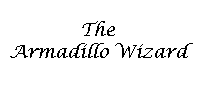
<style>
.page{position:relative;width:200px;height:100px;background:#ffffff}
.page>*{position:absolute;margin:0}
.t1{font:18px "LucidaCalligraphy-Italic";color:#000000}
</style>
<div class="page">
<p class="t1" style="left:10px;top:21px;width:183px;height:37px;text-align:center">The<br>Armadillo Wizard</p>
</div>
